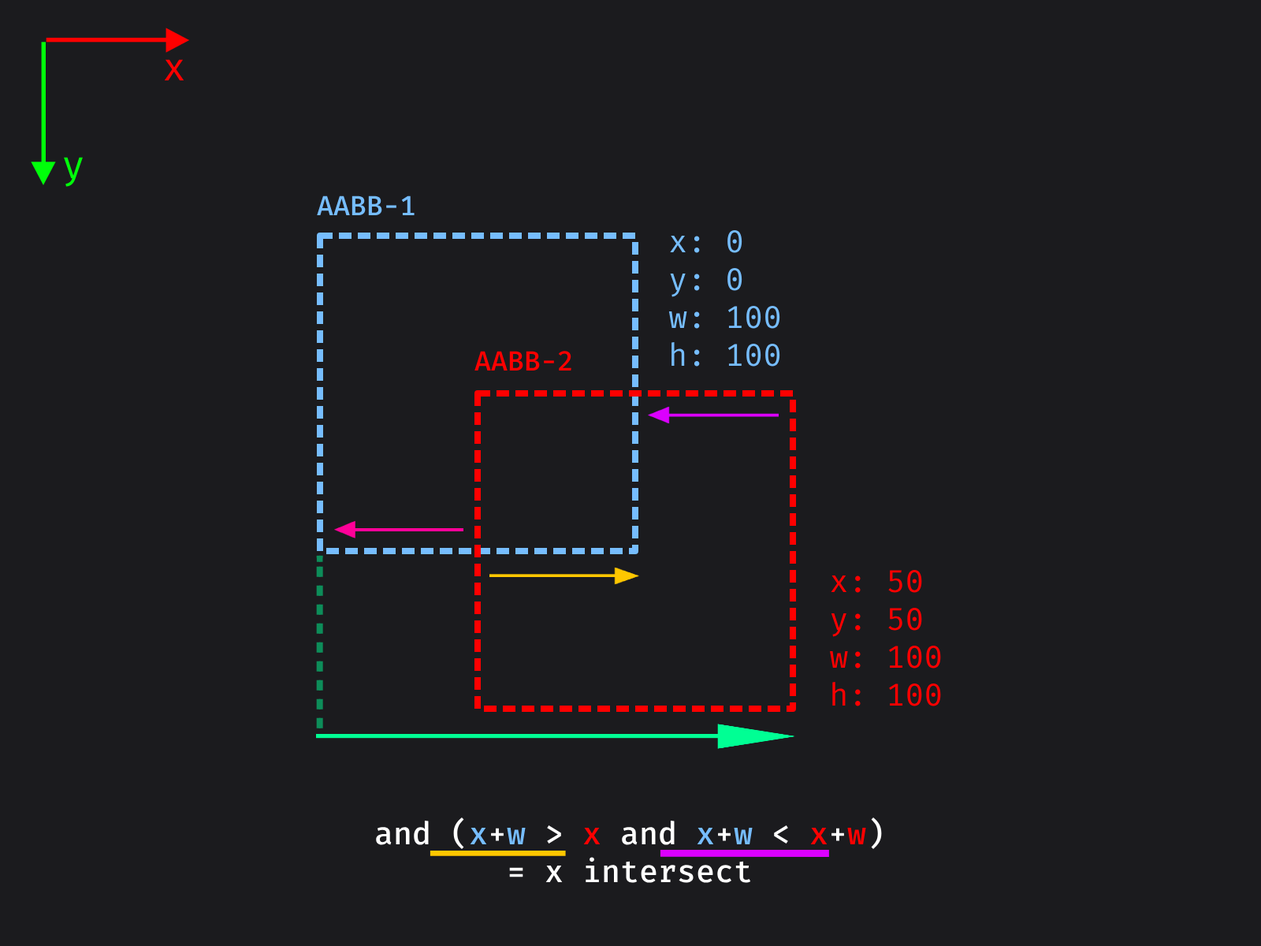
<style>
.page{position:relative;width:1261px;height:946px;background:#1b1b1e}
.page>*{position:absolute;margin:0}
.t1{font:39.4px "FiraMono-Regular";color:#ff0000}
.t2{font:39.4px "FiraMono-Regular";color:#00ff0a}
.t3{font:27.6px "FiraMono-Medium";color:#76bdff}
.t4{font:31.5px "FiraMono-Regular";color:#76bdff}
.t5{font:27.6px "FiraMono-Medium";color:#ff0000}
.t6{font:31.5px "FiraMono-Regular";color:#ff0000}
.t7{font:31.5px "FiraMono-Medium";color:#ffffff}
.t8{font:31.5px "FiraMono-Medium";color:#76bdff}
.t9{font:31.5px "FiraMono-Medium";color:#ff0000}
</style>
<div class="page">
<p class="t1" style="left:164px;top:59px;width:20px;height:21px">x</p>
<p class="t2" style="left:64px;top:157px;width:19px;height:30px">y</p>
<p class="t3" style="left:317px;top:195px;width:98px;height:20px">AABB-1</p>
<p class="t4" style="left:668px;top:230px;width:112px;height:136px">x: 0<br>y: 0<br>w: 100<br>h: 100</p>
<p class="t5" style="left:474px;top:351px;width:97px;height:19px">AABB-2</p>
<p class="t6" style="left:830px;top:570px;width:111px;height:136px">x: 50<br>y: 50<br>w: 100<br>h: 100</p>
<p class="t7" style="left:376px;top:817px;width:506px;height:66px;text-align:center">and (<span class="t8">x</span>+<span class="t8">w </span>&gt; <span class="t9">x </span>and <span class="t8">x</span>+<span class="t8">w </span>&lt; <span class="t9">x</span>+<span class="t9">w</span>)<br>= x intersect</p>
</div>
